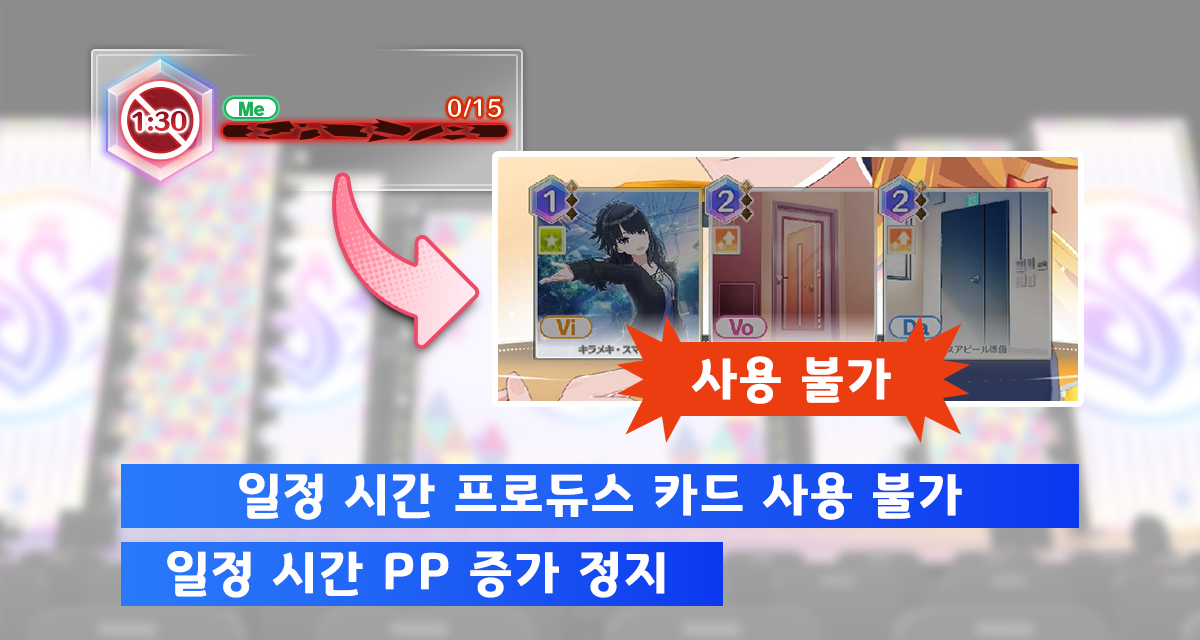
<style>
.page{position:relative;width:1200px;height:640px}
.page>*{position:absolute;margin:0}
.t1{font:50.7px "GyeonggiTitleB";letter-spacing:0.05em;color:#ffffff}
.t2{font:50.7px "GyeonggiTitleB";letter-spacing:0.05em;color:#fffefe}
</style>
<div class="page">
<p class="t1" style="left:691px;top:356px;width:200px;height:48px">사용 불가</p>
<p class="t2" style="left:239px;top:472px;width:723px;height:48px">일정 시간 프로듀스 카드 사용 불가</p>
<p class="t2" style="left:167px;top:551px;width:498px;height:47px">일정 시간 PP 증가 정지</p>
</div>
